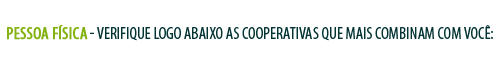
<style>
.page{position:relative;width:500px;height:66px;background:#ffffff}
.page>*{position:absolute;margin:0}
.t1{font:17px "MyriadPro-Cond";color:#033333;text-transform:uppercase}
.t2{font:17px "MyriadPro-Cond";color:#83b211;text-transform:uppercase;font-weight:bold}
</style>
<div class="page">
<p class="t1" style="left:7px;top:25px;width:486px;height:16px"><span class="t2">PESSOA FÍSICA</span> - VERIFIQUE LOGO ABAIXO AS COOPERATIVAS QUE MAIS COMBINAM COM VOCÊ:</p>
</div>
